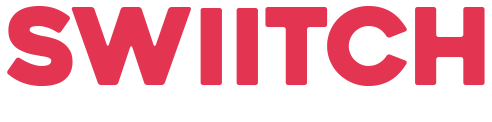
<style>
.page{position:relative;width:492px;height:122px;background:#ffffff}
.page>*{position:absolute;margin:0}
.t1{font:106.5px "Heavitas";color:#e33451}
</style>
<div class="page">
<p class="t1" style="left:7px;top:6px;width:478px;height:80px">SWIITCH</p>
</div>
